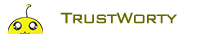
<style>
.page{position:relative;width:200px;height:34px;background:#ffffff}
.page>*{position:absolute;margin:0}
.t1{font:20px "BankGothic-Light";letter-spacing:-0.05em;color:#666600}
</style>
<div class="page">
<p class="t1" style="left:60px;top:12px;width:117px;height:12px">TrustWorty</p>
</div>
